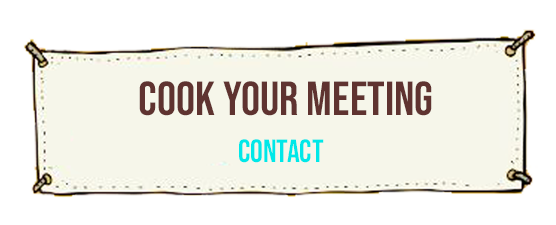
<style>
.page{position:relative;width:556px;height:225px;background:#ffffff}
.page>*{position:absolute;margin:0}
.t1{font:48px "BebasNeue-Regular";color:#5f3330}
.t2{font:32px "BebasNeue-Regular";color:#00e8e8}
</style>
<div class="page">
<p class="t1" style="left:139px;top:81px;width:293px;height:35px">Cook your meEting</p>
<p class="t2" style="left:239px;top:139px;width:85px;height:24px">Contact</p>
</div>
